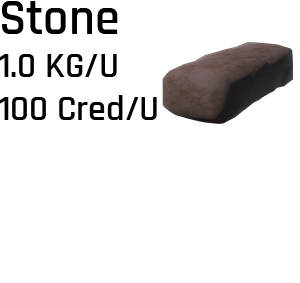
<style>
.page{position:relative;width:300px;height:283px;background:#ffffff}
.page>*{position:absolute;margin:0}
.t1{font:36px "Rajdhani-SemiBold";color:#000000}
.t2{font:50px "Rajdhani-SemiBold";color:#000000}
</style>
<div class="page">
<p class="t1" style="left:0px;top:1px;width:157px;height:119px"><span class="t2">Stone<br></span>1.0 KG/U<br>100 Cred/U</p>
</div>
